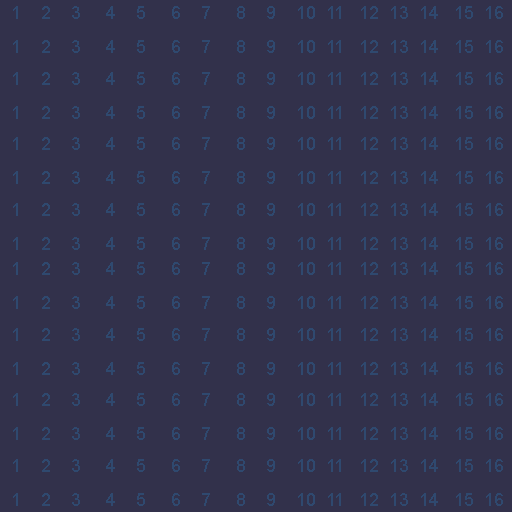
<style>
.page{position:relative;width:512px;height:512px;background:#32314b}
.page>*{position:absolute;margin:0}
.t1{font:18px "ArialMT";color:#2f496f}
</style>
<div class="page">
<p class="t1" style="left:13px;top:6px;width:490px;height:13px">1    2    3     4    5     6    7     8    9    10  11   12  13  14   15  16</p>
<p class="t1" style="left:13px;top:40px;width:490px;height:13px">1    2    3     4    5     6    7     8    9    10  11   12  13  14   15  16</p>
<p class="t1" style="left:13px;top:72px;width:490px;height:13px">1    2    3     4    5     6    7     8    9    10  11   12  13  14   15  16</p>
<p class="t1" style="left:13px;top:106px;width:490px;height:13px">1    2    3     4    5     6    7     8    9    10  11   12  13  14   15  16</p>
<p class="t1" style="left:13px;top:137px;width:490px;height:13px">1    2    3     4    5     6    7     8    9    10  11   12  13  14   15  16</p>
<p class="t1" style="left:13px;top:171px;width:490px;height:13px">1    2    3     4    5     6    7     8    9    10  11   12  13  14   15  16</p>
<p class="t1" style="left:13px;top:203px;width:490px;height:13px">1    2    3     4    5     6    7     8    9    10  11   12  13  14   15  16</p>
<p class="t1" style="left:13px;top:237px;width:490px;height:13px">1    2    3     4    5     6    7     8    9    10  11   12  13  14   15  16</p>
<p class="t1" style="left:13px;top:262px;width:490px;height:13px">1    2    3     4    5     6    7     8    9    10  11   12  13  14   15  16</p>
<p class="t1" style="left:13px;top:296px;width:490px;height:13px">1    2    3     4    5     6    7     8    9    10  11   12  13  14   15  16</p>
<p class="t1" style="left:13px;top:328px;width:490px;height:13px">1    2    3     4    5     6    7     8    9    10  11   12  13  14   15  16</p>
<p class="t1" style="left:13px;top:362px;width:490px;height:13px">1    2    3     4    5     6    7     8    9    10  11   12  13  14   15  16</p>
<p class="t1" style="left:13px;top:393px;width:490px;height:13px">1    2    3     4    5     6    7     8    9    10  11   12  13  14   15  16</p>
<p class="t1" style="left:13px;top:427px;width:490px;height:13px">1    2    3     4    5     6    7     8    9    10  11   12  13  14   15  16</p>
<p class="t1" style="left:13px;top:459px;width:490px;height:13px">1    2    3     4    5     6    7     8    9    10  11   12  13  14   15  16</p>
<p class="t1" style="left:13px;top:493px;width:490px;height:13px">1    2    3     4    5     6    7     8    9    10  11   12  13  14   15  16</p>
</div>
